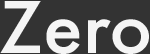
<style>
.page{position:relative;width:150px;height:54px;background:#333333}
.page>*{position:absolute;margin:0}
.t1{font:68.9px "Futura-Medium";color:#ffffff;scale:1.05 1}
</style>
<div class="page">
<p class="t1" style="left:0px;top:1px;width:149px;height:53px;opacity:0.95">Zero</p>
</div>
